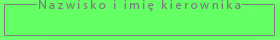
<style>
.page{position:relative;width:280px;height:40px;background:#64ff64}
.page>*{position:absolute;margin:0}
.t1{font:12.5px "MyriadPro-Regular";letter-spacing:0.2em;color:#7c7c7c}
</style>
<div class="page">
<p class="t1" style="left:39px;top:0px;width:202px;height:11px">Nazwisko i imię kierownika</p>
</div>
